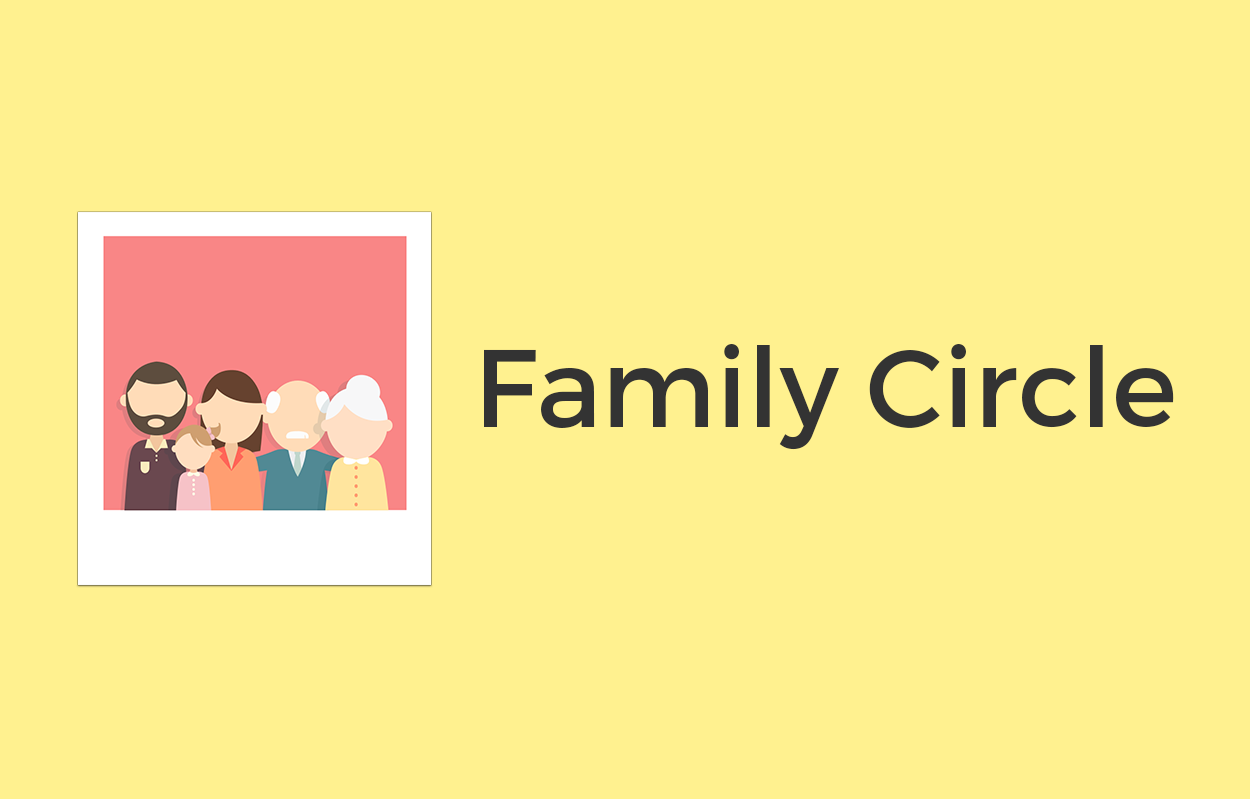
<style>
.page{position:relative;width:1250px;height:799px;background:#fff18f}
.page>*{position:absolute;margin:0}
.t1{font:110px "Montserrat-Regular";color:#333333}
</style>
<div class="page">
<p class="t1" style="left:484px;top:344px;width:690px;height:106px">Family Circle</p>
</div>
